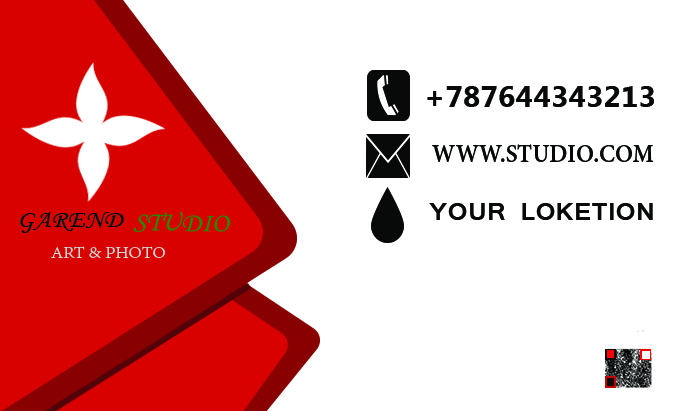
<style>
.page{position:relative;width:686px;height:411px;background:#ffffff}
.page>*{position:absolute;margin:0}
.t1{font:30.5px "LaoUI-Bold";color:#080a0a;text-transform:uppercase}
.t2{font:27.2px "AdobeDevanagari-Bold";color:#060808;text-transform:uppercase;scale:0.97 1}
.t3{font:10.4px "Latha-Bold";color:#080a0a;text-transform:uppercase;scale:1.08 1}
.t4{font:25.5px "MonotypeCorsiva";color:#070809;text-transform:uppercase;scale:1.07 1}
.t5{font:26.7px "MonotypeCorsiva";color:#189100;text-transform:uppercase;scale:1.06 1}
.t6{font:17px "AdobeDevanagari-Regular";color:#ccd8d6;text-transform:uppercase;scale:1.13 1}
</style>
<div class="page">
<p class="t1" style="left:427px;top:86px;width:227px;height:21px">+787644343213</p>
<p class="t2" style="left:432px;top:144px;width:222px;height:18px">www.studio.com</p>
<p class="t3" style="left:429px;top:203px;width:224px;height:17px">your loketion</p>
<p class="t4" style="left:20px;top:212px;width:104px;height:21px">garend</p>
<p class="t5" style="left:133px;top:212px;width:98px;height:21px;rotate:1deg">studio</p>
<p class="t6" style="left:51px;top:246px;width:114px;height:13px">art &amp; photo</p>
</div>
